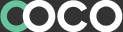
<style>
.page{position:relative;width:123px;height:32px;background:#333333}
.page>*{position:absolute;margin:0}
.t1{font:44px "COUTURE-Bold";color:#ffffff}
.t2{font:44px "COUTURE-Bold";letter-spacing:-0.22em;color:#68c39f}
</style>
<div class="page">
<p class="t1" style="left:0px;top:0px;width:123px;height:33px"><span class="t2">C</span>OCO</p>
</div>
